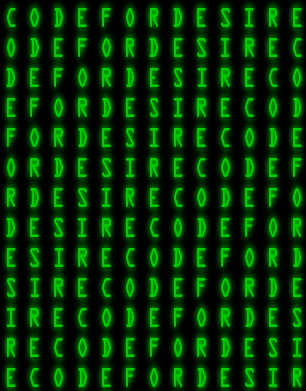
<style>
.page{position:relative;width:306px;height:391px}
.page>*{position:absolute;margin:0}
.t1{font:24px "OCRAStd";color:#00cc00;scale:0.69 1}
</style>
<div class="page">
<p class="t1" style="left:7px;top:8px;width:295px;height:19px">C O D E F O R D E S I R E</p>
<p class="t1" style="left:7px;top:38px;width:295px;height:19px">O D E F O R D E S I R E C</p>
<p class="t1" style="left:6px;top:68px;width:295px;height:19px">D E F O R D E S I R E C O</p>
<p class="t1" style="left:7px;top:98px;width:294px;height:19px">E F O R D E S I R E C O D</p>
<p class="t1" style="left:7px;top:128px;width:295px;height:19px">F O R D E S I R E C O D E</p>
<p class="t1" style="left:7px;top:158px;width:295px;height:19px">O R D E S I R E C O D E F</p>
<p class="t1" style="left:7px;top:188px;width:294px;height:19px">R D E S I R E C O D E F O</p>
<p class="t1" style="left:6px;top:218px;width:295px;height:19px">D E S I R E C O D E F O R</p>
<p class="t1" style="left:7px;top:248px;width:294px;height:19px">E S I R E C O D E F O R D</p>
<p class="t1" style="left:7px;top:278px;width:295px;height:19px">S I R E C O D E F O R D E</p>
<p class="t1" style="left:6px;top:308px;width:295px;height:19px">I R E C O D E F O R D E S</p>
<p class="t1" style="left:7px;top:338px;width:295px;height:19px">R E C O D E F O R D E S I</p>
<p class="t1" style="left:7px;top:368px;width:294px;height:19px">E C O D E F O R D E S I R</p>
</div>
